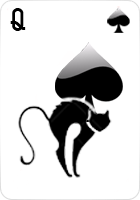
<style>
.page{position:relative;width:140px;height:200px;background:#ffffff}
.page>*{position:absolute;margin:0}
.t1{font:26px "CardCharacters";color:#000000}
</style>
<div class="page">
<p class="t1" style="left:10px;top:8px;width:16px;height:23px">Q</p>
</div>
